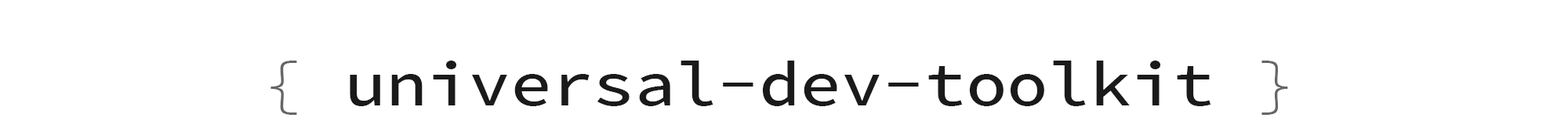
<style>
.page{position:relative;width:1568px;height:118px;background:#ffffff}
.page>*{position:absolute;margin:0}
.t1{font:62.7px "SourceCodePro-Medium";color:#1a1a1a;scale:1.1 1}
.t2{font:62.7px "SourceCodePro-Light";color:#666666;scale:1.1 1}
</style>
<div class="page">
<p class="t1" style="left:270px;top:60px;width:1018px;height:54px"><span class="t2">{ </span>universal-dev-toolkit <span class="t2">}</span></p>
</div>
